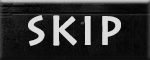
<style>
.page{position:relative;width:150px;height:60px}
.page>*{position:absolute;margin:0}
.t1{font:46.2px "LithosPro-Regular";color:#dcdcdc;font-weight:bold}
</style>
<div class="page">
<p class="t1" style="left:28px;top:15px;width:93px;height:31px">skip</p>
</div>
